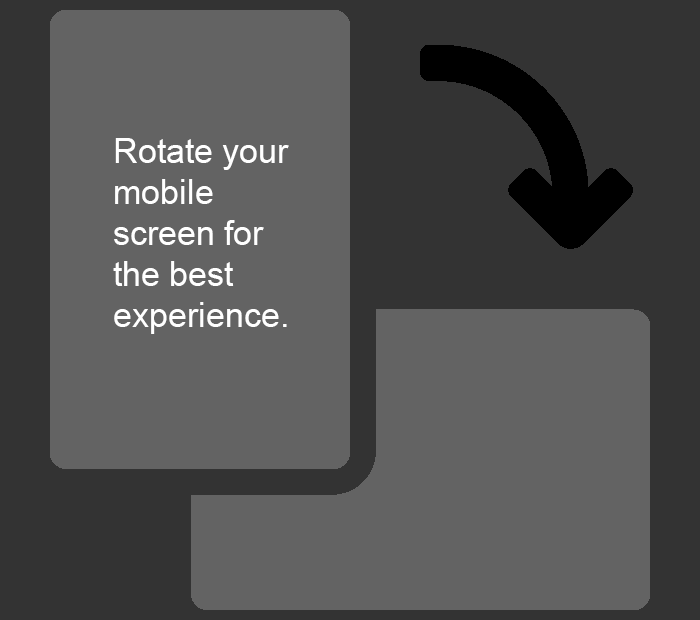
<style>
.page{position:relative;width:700px;height:620px;background:#636363}
.page>*{position:absolute;margin:0}
.t1{font:34px "ArialMT";color:#ffffff}
</style>
<div class="page">
<p class="t1" style="left:113px;top:138px;width:176px;height:196px">Rotate your mobile screen for the best experience.</p>
</div>
